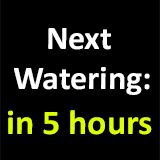
<style>
.page{position:relative;width:160px;height:160px;background:#000000}
.page>*{position:absolute;margin:0}
.t1{font:33.3px "Calibri-Bold";color:#ffffff}
.t2{font:35.1px "Calibri-Bold";color:#deff00}
</style>
<div class="page">
<p class="t1" style="left:14px;top:28px;width:136px;height:67px;text-align:center">Next <br>Watering:</p>
<p class="t2" style="left:8px;top:110px;width:144px;height:25px">in 5 hours</p>
</div>
